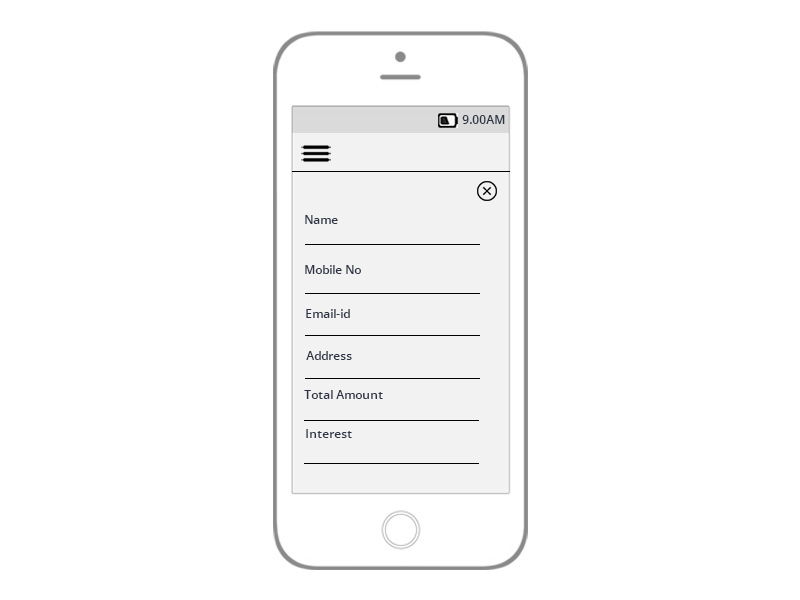
<style>
.page{position:relative;width:800px;height:600px;background:#ffffff}
.page>*{position:absolute;margin:0}
.t1{font:12px "OpenSans-Semibold";color:#2c3445}
</style>
<div class="page">
<p class="t1" style="left:462px;top:115px;width:43px;height:9px">9.00AM</p>
<p class="t1" style="left:305px;top:215px;width:33px;height:9px">Name</p>
<p class="t1" style="left:305px;top:265px;width:56px;height:9px">Mobile No</p>
<p class="t1" style="left:306px;top:309px;width:44px;height:9px">Email-id</p>
<p class="t1" style="left:306px;top:351px;width:46px;height:9px">Address</p>
<p class="t1" style="left:304px;top:390px;width:79px;height:9px">Total Amount</p>
<p class="t1" style="left:306px;top:429px;width:46px;height:9px">Interest</p>
</div>
